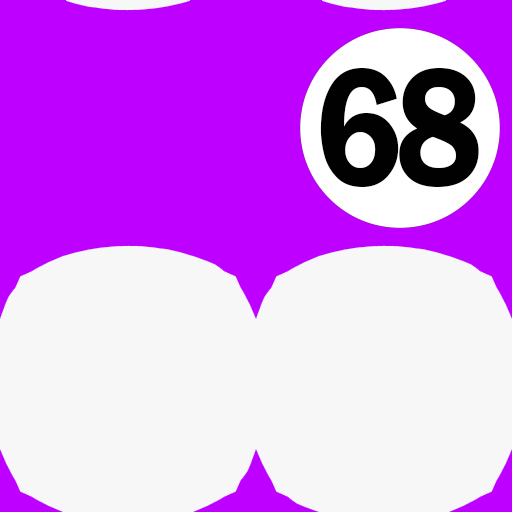
<style>
.page{position:relative;width:512px;height:512px;background:#f7f7f7}
.page>*{position:absolute;margin:0}
.t1{font:172.5px "FranklinGothic-Demi";letter-spacing:-0.05em;color:#010101;scale:0.87 1}
</style>
<div class="page">
<p class="t1" style="left:320px;top:68px;width:159px;height:119px">68</p>
</div>
